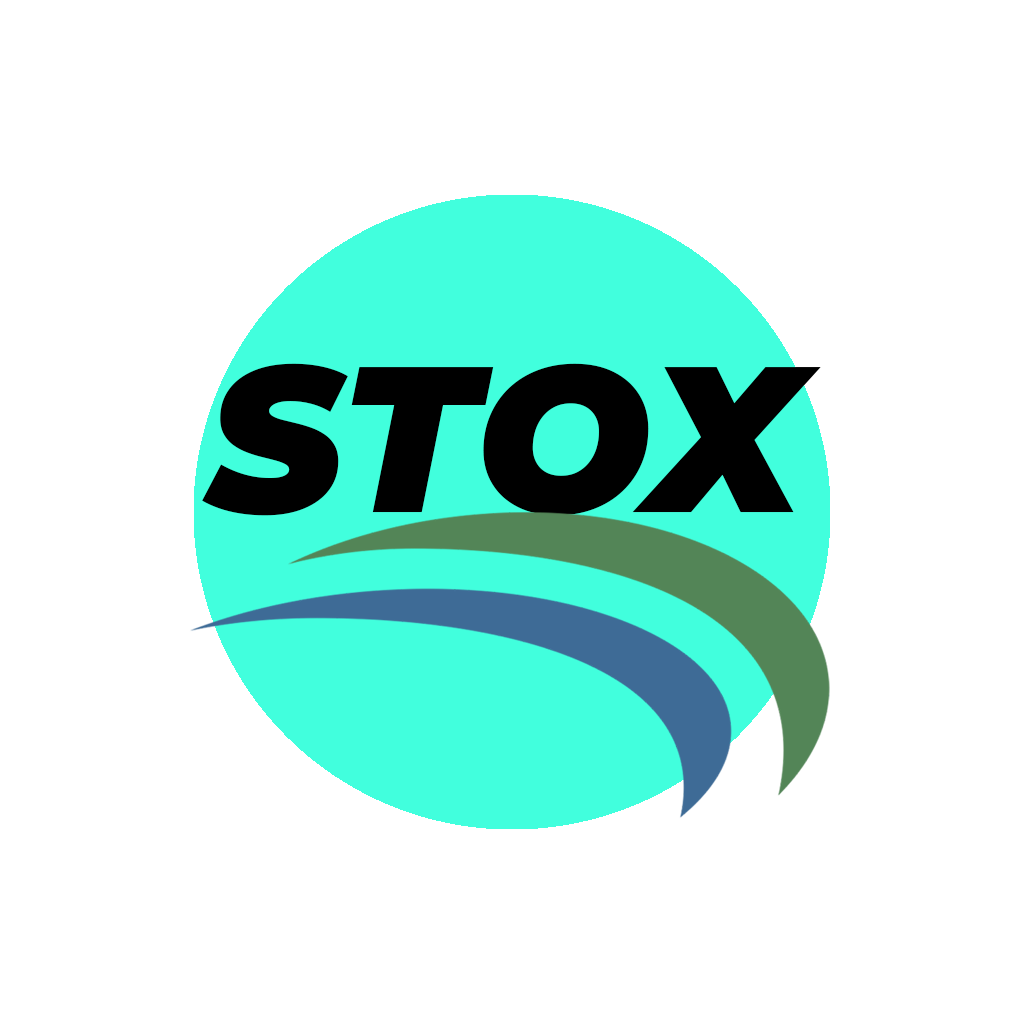
<style>
.page{position:relative;width:1024px;height:1024px;background:#ffffff}
.page>*{position:absolute;margin:0}
.t1{font:207.5px "Montserrat-BlackItalic";color:#000000}
</style>
<div class="page">
<p class="t1" style="left:202px;top:363px;width:619px;height:153px">STOX</p>
</div>
